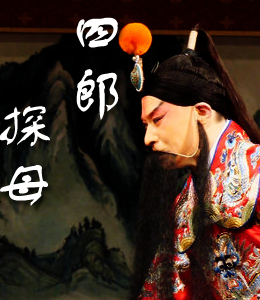
<style>
.page{position:relative;width:260px;height:300px}
.page>*{position:absolute;margin:0}
.t1{font:60px "FZSTK--GBK1-0";letter-spacing:0.005em;color:#ffffff;text-transform:uppercase}
</style>
<div class="page">
<p class="t1" style="left:0px;top:17px;width:119px;height:189px">四郎<br>      探母</p>
</div>
